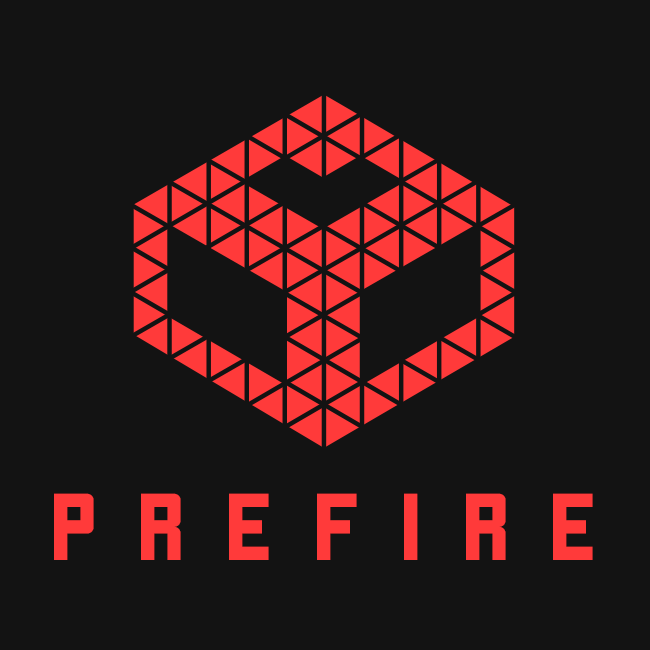
<style>
.page{position:relative;width:650px;height:650px;background:#131313}
.page>*{position:absolute;margin:0}
.t1{font:91.9px "Cornerstone";letter-spacing:0.38em;color:#ff3a3a;text-transform:uppercase}
</style>
<div class="page">
<p class="t1" style="left:54px;top:493px;width:539px;height:67px">Prefire</p>
</div>
